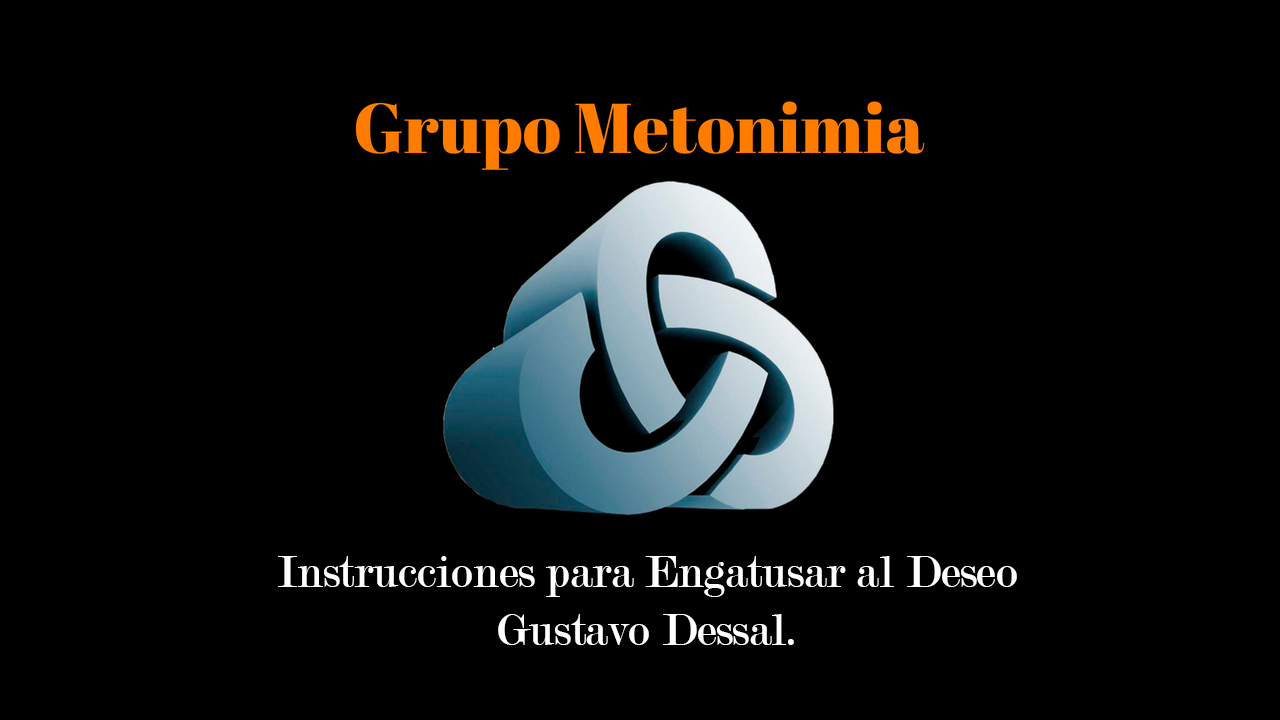
<style>
.page{position:relative;width:1280px;height:720px;background:#000000}
.page>*{position:absolute;margin:0}
.t1{font:48px "Modern-Regular";color:#ffffff}
</style>
<div class="page">
<p class="t1" style="left:278px;top:556px;width:739px;height:89px;text-align:center">Instrucciones para Engatusar al Deseo<br>Gustavo Dessal.</p>
</div>
